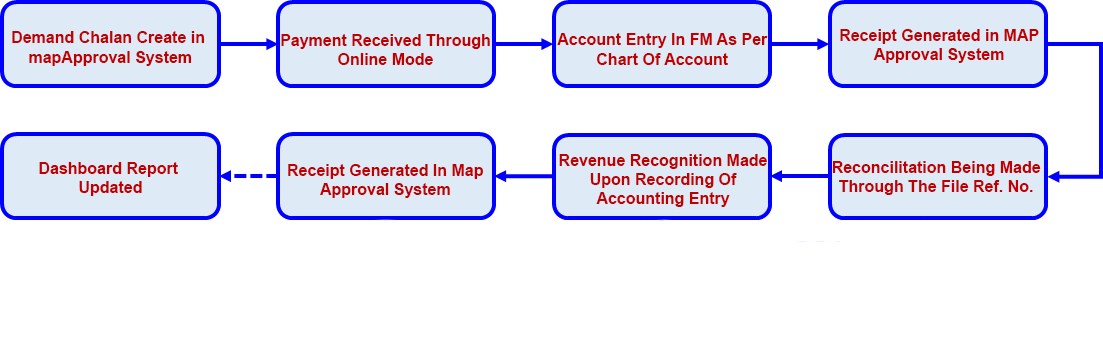
<style>
.page{position:relative;width:1103px;height:363px;background:#ffffff}
.page>*{position:absolute;margin:0}
.t1{font:16px "Arial-BoldMT";color:#c00000}
</style>
<div class="page">
<p class="t1" style="left:840px;top:29px;width:199px;height:34px;text-align:center">Receipt Generated in MAP<br>Approval System</p>
<p class="t1" style="left:12px;top:31px;width:193px;height:35px;text-align:center">Demand Chalan Create in <br>mapApproval System</p>
<p class="t1" style="left:281px;top:34px;width:209px;height:31px;text-align:center">Payment Received Through<br>Online Mode</p>
<p class="t1" style="left:557px;top:33px;width:211px;height:32px;text-align:center">Account Entry In FM As Per<br>Chart Of Account</p>
<p class="t1" style="left:559px;top:154px;width:208px;height:53px;text-align:center">Revenue Recognition Made<br>Upon Recording Of<br>Accounting Entry</p>
<p class="t1" style="left:832px;top:161px;width:209px;height:34px;text-align:center">Reconcilitation Being Made<br>Through The File Ref. No.</p>
<p class="t1" style="left:39px;top:162px;width:139px;height:34px;text-align:center">Dashboard Report <br>Updated</p>
<p class="t1" style="left:288px;top:164px;width:195px;height:34px;text-align:center">Receipt Generated In Map<br>Approval System</p>
</div>
